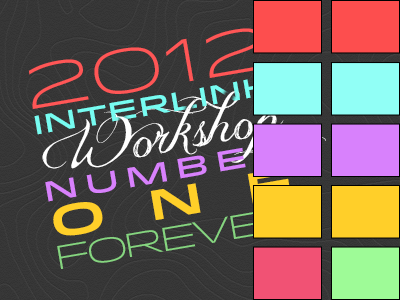
<style>
.page{position:relative;width:400px;height:300px}
.page>*{position:absolute;margin:0}
.t1{font:60.5px "Idlewild-Light";color:#ff5656}
.t2{font:26.4px "Idlewild-Medium";color:#77fcf1}
.t3{font:57px "JellykaDeliciousCake";color:#ffffff}
.t4{font:27.9px "Idlewild-Medium";letter-spacing:0.24em;color:#d881fc}
.t5{font:42.2px "Idlewild-Bold";letter-spacing:1.04em;color:#ffcf29}
.t6{font:33.3px "Idlewild-Light";letter-spacing:-0.14em;color:#86d580}
</style>
<div class="page">
<p class="t1" style="left:28px;top:28px;width:238px;height:81px;rotate:-10deg">2012</p>
<p class="t2" style="left:34px;top:75px;width:238px;height:60px;rotate:-10deg">interlink</p>
<p class="t3" style="left:42px;top:91px;width:284px;height:78px;rotate:-10deg">Workshop</p>
<p class="t4" style="left:45px;top:143px;width:242px;height:59px;rotate:-10deg">number</p>
<p class="t5" style="left:53px;top:167px;width:239px;height:69px;rotate:-10deg">one</p>
<p class="t6" style="left:57px;top:207px;width:244px;height:62px;rotate:-10deg">Forever</p>
</div>
